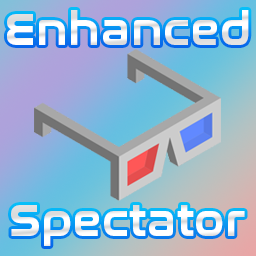
<style>
.page{position:relative;width:256px;height:256px}
.page>*{position:absolute;margin:0}
.t1{font:46.2px "NasalizationRg-Bold";color:#ffffff}
</style>
<div class="page">
<p class="t1" style="left:7px;top:10px;width:242px;height:35px">Enhanced</p>
<p class="t1" style="left:11px;top:205px;width:234px;height:41px">Spectator</p>
</div>
